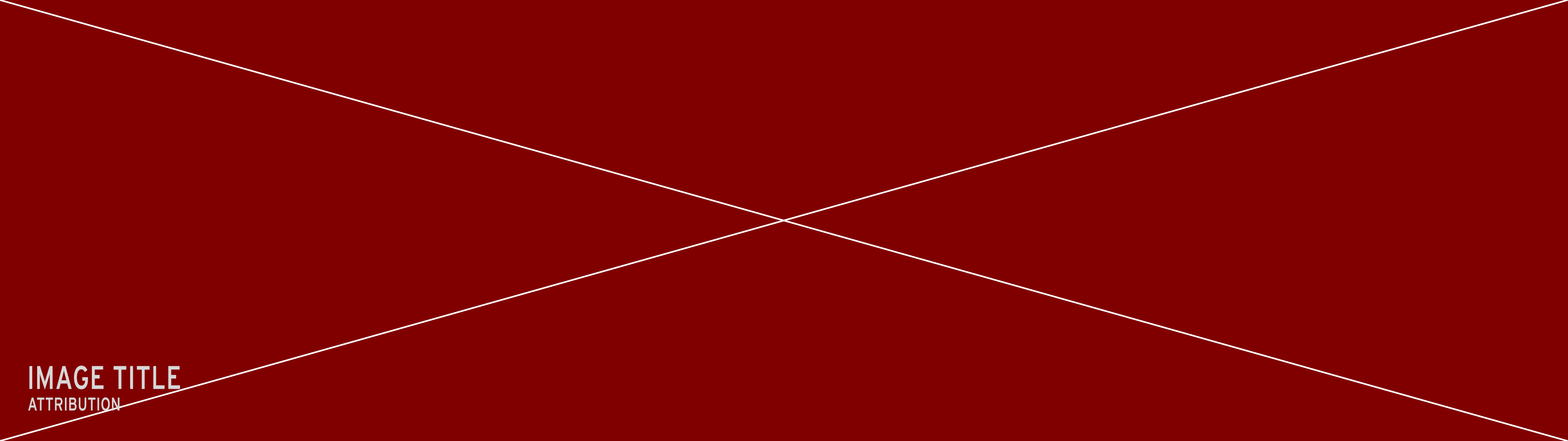
<style>
.page{position:relative;width:1568px;height:441px;background:#800000}
.page>*{position:absolute;margin:0}
.t1{font:32.3px "Interstate-Regular";color:#d7d7d7;text-transform:uppercase;font-weight:bold;scale:0.75 1}
.t2{font:18.2px "Interstate-Regular";color:#d7d7d7;text-transform:uppercase;font-weight:bold;scale:0.75 1}
</style>
<div class="page">
<p class="t1" style="left:29px;top:365px;width:151px;height:25px">IMAGE TITLE</p>
<p class="t2" style="left:28px;top:397px;width:92px;height:14px">attribution</p>
</div>
